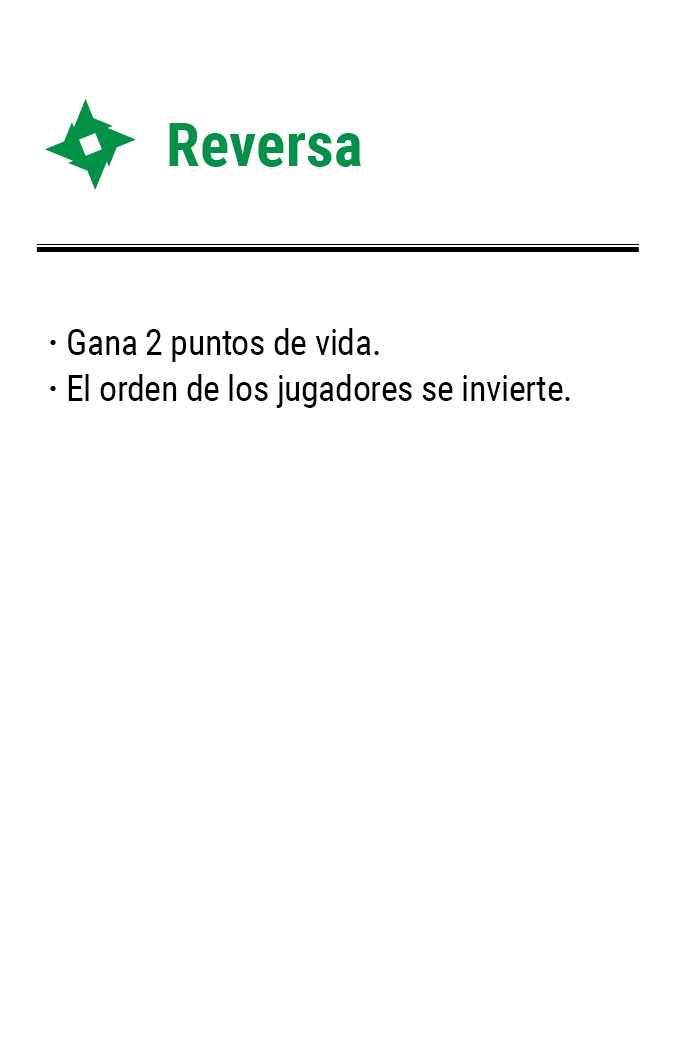
<style>
.page{position:relative;width:675px;height:1050px;background:#ffffff}
.page>*{position:absolute;margin:0}
.t1{font:61.2px "RobotoCondensed-Bold";color:#019147}
.t2{font:35.8px/45.8px "RobotoCondensed-Regular";letter-spacing:-0.01em;color:#000000}
.t3{font:35.8px/45.8px "RobotoCondensed-Bold";letter-spacing:-0.01em;color:#000000}
</style>
<div class="page">
<p class="t1" style="left:169px;top:123px;width:192px;height:44px">Reversa</p>
<p class="t2" style="left:68px;top:328px;width:502px;height:80px">Gana 2 puntos de vida.<br>El orden de los jugadores se invierte.</p>
<p class="t3" style="left:50px;top:340px;width:6px;height:51px">·<br>·</p>
</div>
